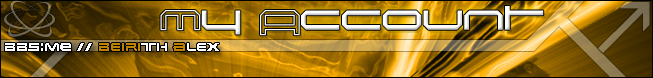
<style>
.page{position:relative;width:653px;height:78px}
.page>*{position:absolute;margin:0}
.t1{font:30px "Induction";color:#ffffff}
.t2{font:12px "EarthNormal";color:#ffffff}
.t3{font:12px "EarthNormal";color:#bd8200}
</style>
<div class="page">
<p class="t1" style="left:160px;top:6px;width:384px;height:30px">My Account</p>
<p class="t2" style="left:5px;top:43px;width:214px;height:8px">BBS|ME // <span class="t3">beiri</span>th <span class="t3">a</span>lex</p>
</div>
